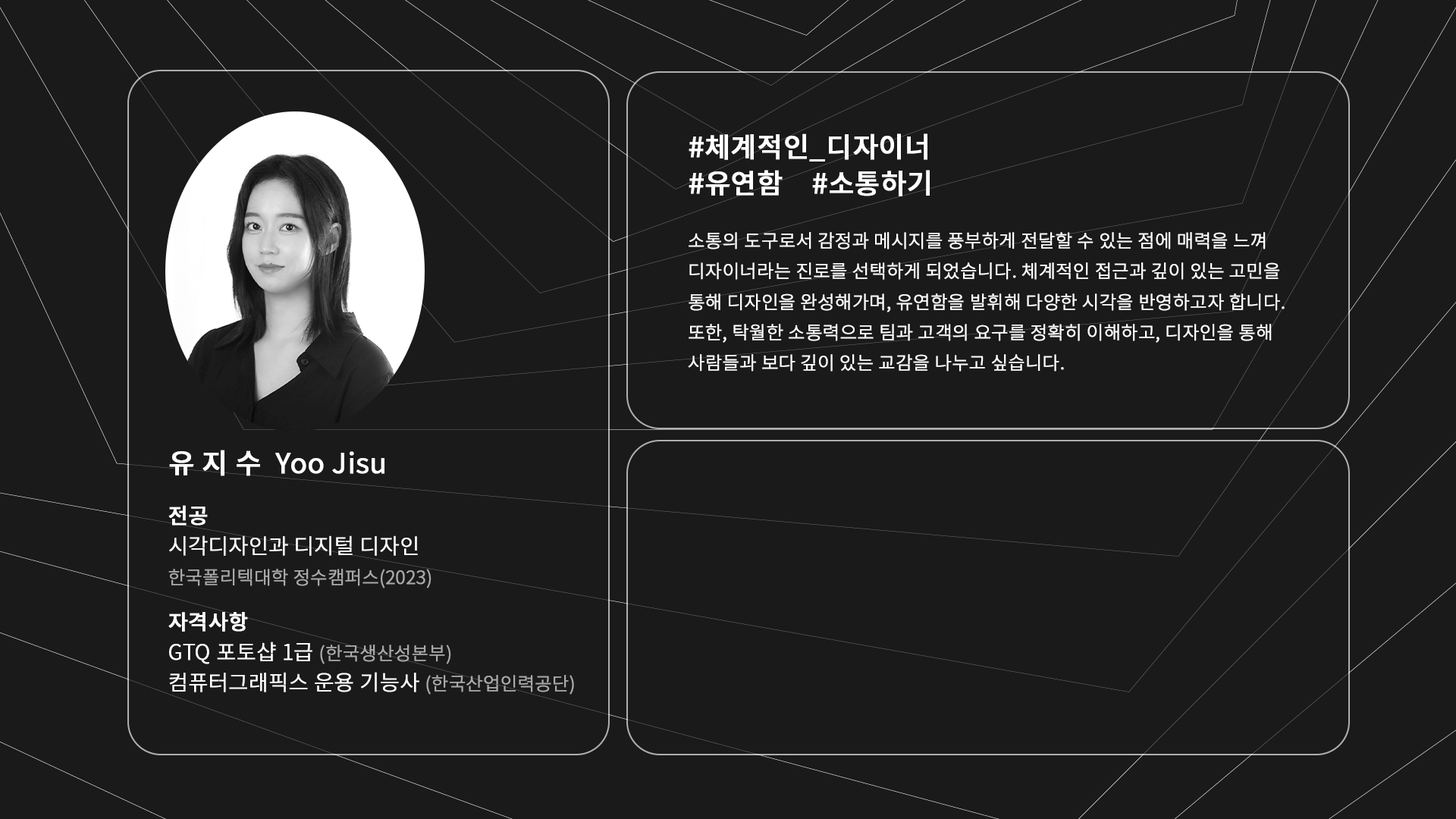
<style>
.page{position:relative;width:1456px;height:819px;background:#1a1a1a}
.page>*{position:absolute;margin:0}
.t1{font:27.8px/36.4px "NotoSansKR-Medium";color:#ffffff;font-weight:bold}
.t2{font:18.2px/30.4px "NotoSansKR-Light";color:#ffffff;font-weight:bold}
.t3{font:27.8px "NotoSansKR-Regular";color:#ffffff;font-weight:bold}
.t4{font:27.8px "NotoSansKR-Medium";color:#ffffff;font-weight:bold}
.t5{font:18.2px/30.3px "NotoSansKR-Light";color:#a9a9a9;font-weight:bold}
.t6{font:27.7px/30.3px "NotoSansKR-Regular";color:#ffffff;font-weight:bold}
.t7{font:21.2px/30.3px "NotoSansKR-Medium";color:#ffffff;font-weight:bold}
.t8{font:21.2px/30.3px "NotoSansKR-Light";color:#ffffff;font-weight:bold}
</style>
<div class="page">
<p class="t1" style="left:689px;top:133px;width:241px;height:63px">#체계적인_디자이너<br>#유연함    #소통하기</p>
<p class="t2" style="left:688px;top:232px;width:597px;height:140px">소통의 도구로서 감정과 메시지를 풍부하게 전달할 수 있는 점에 매력을 느껴 <br>디자이너라는 진로를 선택하게 되었습니다. 체계적인 접근과 깊이 있는 고민을 <br>통해 디자인을 완성해가며, 유연함을 발휘해 다양한 시각을 반영하고자 합니다. <br>또한, 탁월한 소통력으로 팀과 고객의 요구를 정확히 이해하고, 디자인을 통해 <br>사람들과 보다 깊이 있는 교감을 나누고 싶습니다.</p>
<p class="t3" style="left:169px;top:450px;width:215px;height:26px"><span class="t4">유 지 수  </span>Yoo Jisu</p>
<p class="t5" style="left:168px;top:505px;width:406px;height:190px"><span class="t6"><br><br></span><span class="t7">전공</span><span class="t8"> <br>시각디자인과 디지털 디자인<br></span>한국폴리텍대학 정수캠퍼스(2023)<br><span class="t7">자격사항 <br></span><span class="t8">GTQ 포토샵 1급 </span>(한국생산성본부)<br><span class="t8">컴퓨터그래픽스 운용 기능사 </span>(한국산업인력공단)</p>
</div>
